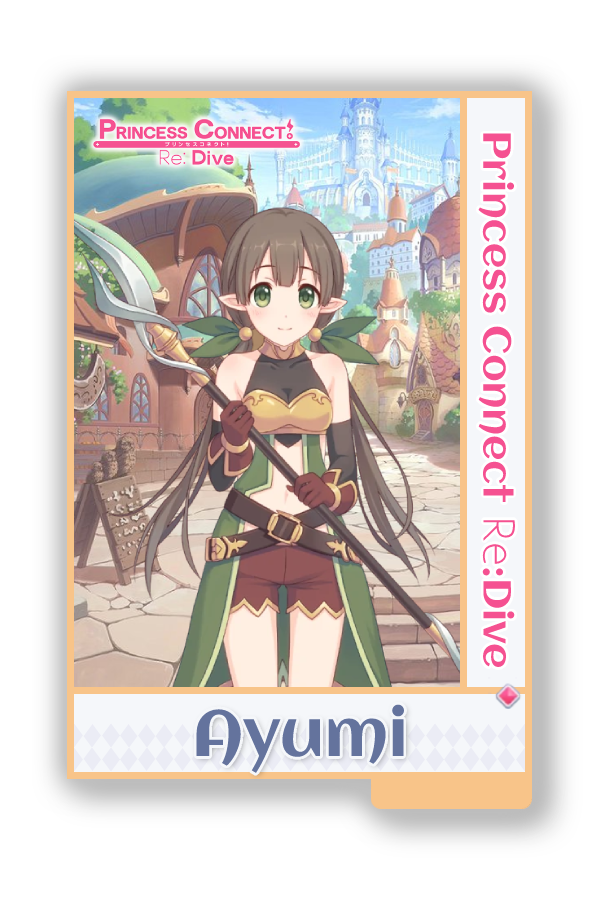
<style>
.page{position:relative;width:600px;height:900px;background:#ffffff}
.page>*{position:absolute;margin:0}
.t1{font:39px "Aclonica-Regular";color:#f55191}
.t2{font:39px "AaarghNormal";color:#f55191}
.t3{font:65px "Aclonica-Regular";color:#64739d}
</style>
<div class="page">
<p class="t1" style="left:478px;top:133px;width:38px;height:534px;rotate:90deg">Princess Connect <span class="t2">Re</span>:Dive</p>
<p class="t3" style="left:196px;top:704px;width:208px;height:69px">Ayumi</p>
</div>
